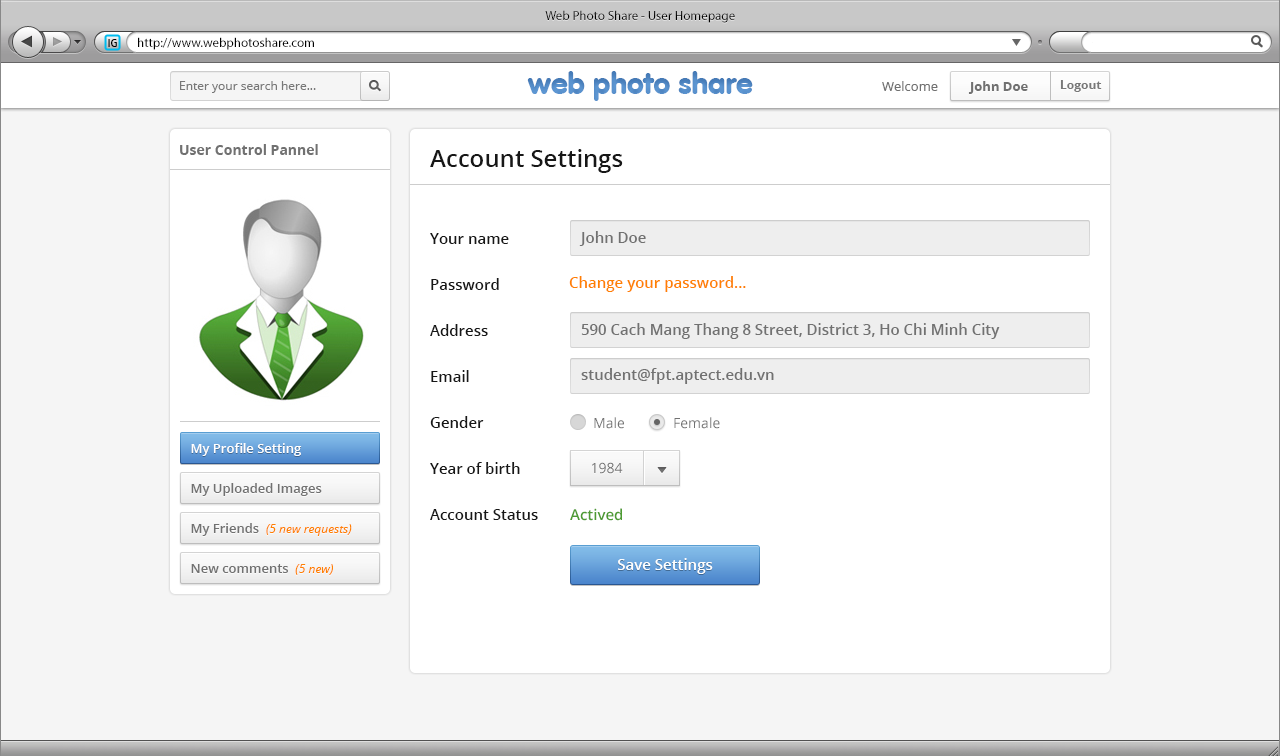
<style>
.page{position:relative;width:1280px;height:756px;background:#ffffff}
.page>*{position:absolute;margin:0}
.t1{font:13px "LucidaSans";color:#000000}
.t2{font:12px "Dax-Regular";color:#000000}
.t3{font:30px "VAGRounded-Black";color:#619bd7}
.t4{font:12px "OpenSans";color:#787878}
.t5{font:13px "OpenSans";color:#717171}
.t6{font:13px "OpenSans-Bold";color:#717171}
.t7{font:12px "OpenSans-Bold";color:#787878}
.t8{font:14px "OpenSans-Bold";color:#717171}
.t9{font:24px "OpenSans-Semibold";color:#171717}
.t10{font:15px/46px "OpenSans-Semibold";color:#171717}
.t11{font:15px "OpenSans-Semibold";color:#717171}
.t12{font:15px "OpenSans-Semibold";color:#ff8100}
.t13{font:14px "OpenSans";color:#717171}
.t14{font:13px "OpenSans-Semibold";color:#ffffff}
.t15{font:13px "OpenSans-Semibold";color:#717171}
.t16{font:15px "OpenSans-Semibold";color:#4e9b33}
.t17{font:12px "OpenSans-Italic";color:#ff8100}
.t18{font:15px "OpenSans-Semibold";color:#ffffff}
</style>
<div class="page">
<p class="t1" style="left:545px;top:10px;width:190px;height:13px">Web Photo Share - User Homepage</p>
<p class="t2" style="left:108px;top:39px;width:9px;height:8px">IG</p>
<p class="t1" style="left:138px;top:37px;width:176px;height:13px">http://www.webphotoshare.com</p>
<p class="t3" style="left:527px;top:71px;width:226px;height:30px">web photo share</p>
<p class="t4" style="left:180px;top:81px;width:136px;height:12px">Enter your search here...</p>
<p class="t5" style="left:882px;top:81px;width:56px;height:10px">Welcome</p>
<p class="t6" style="left:968px;top:81px;width:60px;height:13px">John Doe</p>
<p class="t7" style="left:1060px;top:80px;width:42px;height:12px">Logout</p>
<p class="t8" style="left:180px;top:144px;width:138px;height:11px">User Control Pannel</p>
<p class="t9" style="left:430px;top:149px;width:193px;height:24px">Account Settings</p>
<p class="t10" style="left:430px;top:233px;width:108px;height:287px">Your name<br>Password<br>Address<br>Email<br>Gender<br>Year of birth<br>Account Status</p>
<p class="t11" style="left:579px;top:231px;width:67px;height:15px">John Doe</p>
<p class="t12" style="left:569px;top:276px;width:177px;height:16px">Change your password...</p>
<p class="t11" style="left:581px;top:323px;width:419px;height:16px">590 Cach Mang Thang 8 Street, District 3, Ho Chi Minh City</p>
<p class="t11" style="left:581px;top:368px;width:193px;height:16px">student@fpt.aptect.edu.vn</p>
<p class="t13" style="left:594px;top:417px;width:30px;height:12px">Male</p>
<p class="t13" style="left:674px;top:417px;width:46px;height:12px">Female</p>
<p class="t14" style="left:191px;top:443px;width:111px;height:13px">My Profile Setting</p>
<p class="t13" style="left:592px;top:462px;width:31px;height:12px">1984</p>
<p class="t15" style="left:191px;top:483px;width:131px;height:13px">My Uploaded Images</p>
<p class="t16" style="left:570px;top:508px;width:52px;height:13px">Actived</p>
<p class="t17" style="left:191px;top:523px;width:161px;height:13px"><span class="t15">My Friends  </span>(5 new requests)</p>
<p class="t18" style="left:618px;top:558px;width:95px;height:16px">Save Settings</p>
<p class="t15" style="left:191px;top:564px;width:142px;height:11px">New comments  <span class="t17">(5 new)</span></p>
</div>
